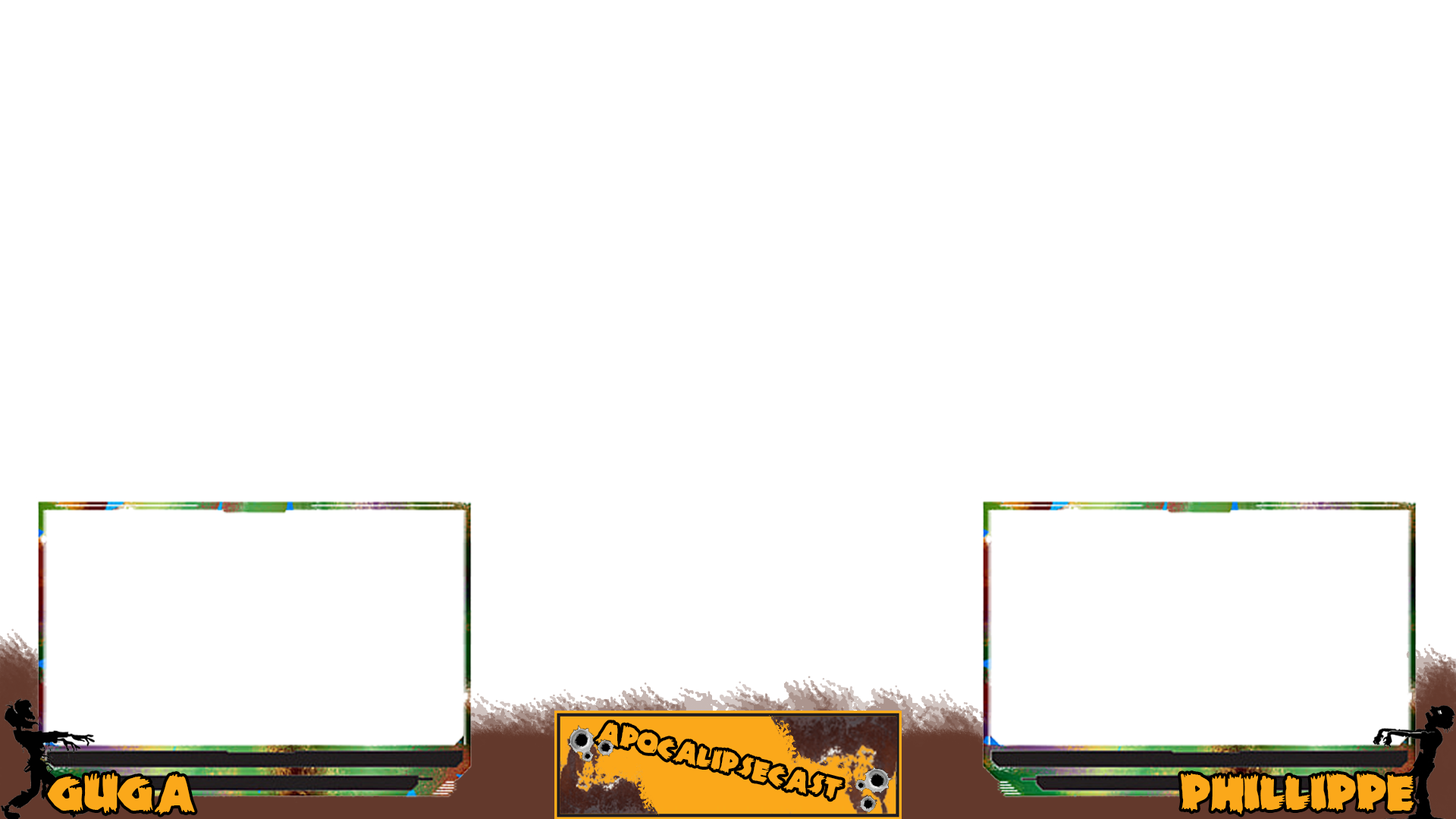
<style>
.page{position:relative;width:1456px;height:819px;background:#ffffff}
.page>*{position:absolute;margin:0}
.t1{font:56.9px "ZombieA";color:#fba81a}
</style>
<div class="page">
<p class="t1" style="left:47px;top:773px;width:148px;height:41px">Guga</p>
<p class="t1" style="left:1181px;top:773px;width:233px;height:41px">PhilLippe</p>
</div>
